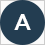
<style>
.page{position:relative;width:45px;height:45px;background:#233d51}
.page>*{position:absolute;margin:0}
.t1{font:22px "NanumGothicExtraBold";color:#ffffff}
</style>
<div class="page">
<p class="t1" style="left:14px;top:14px;width:17px;height:16px">A</p>
</div>
